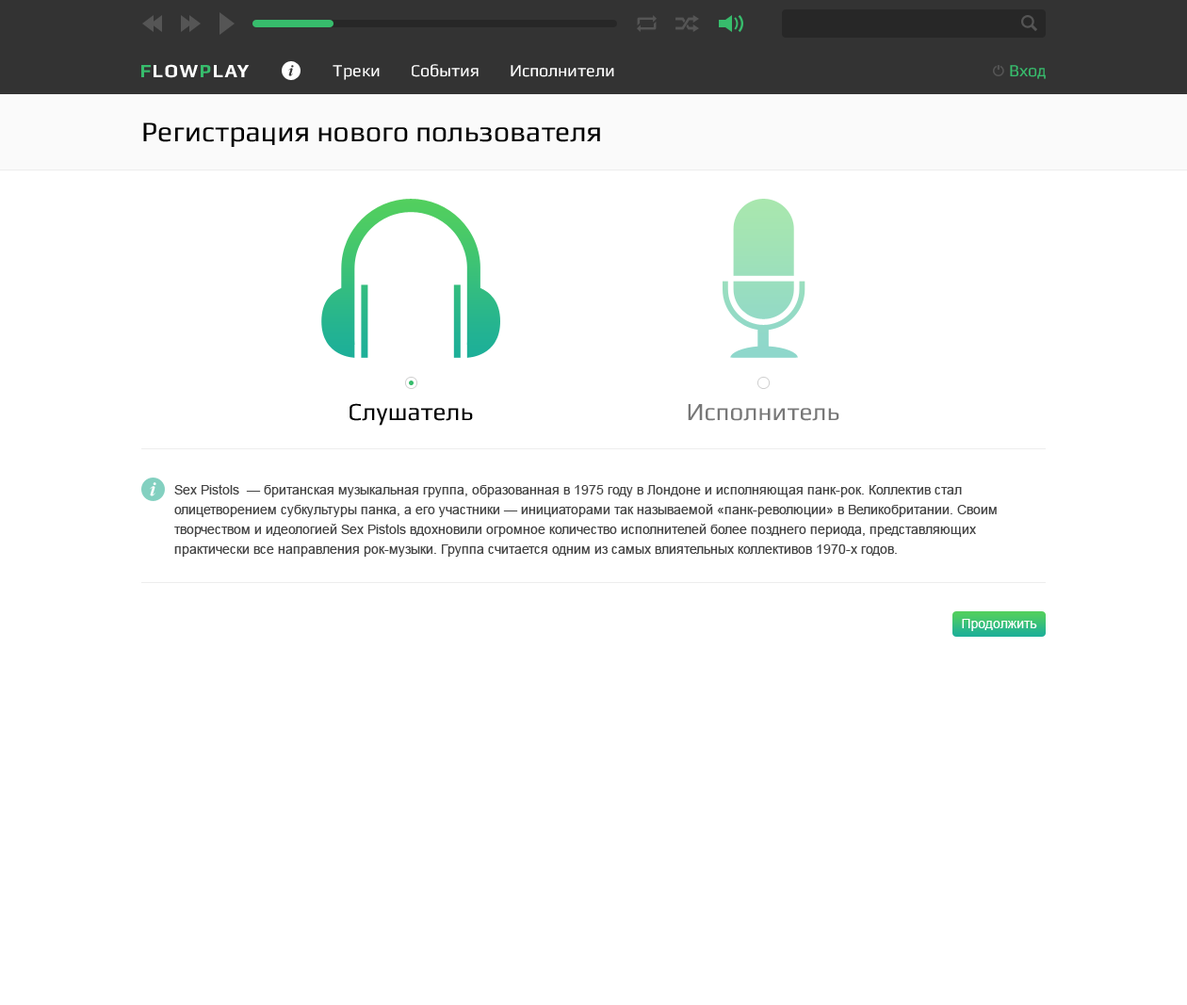
<style>
.page{position:relative;width:1187px;height:1005px;background:#ffffff}
.page>*{position:absolute;margin:0}
.t1{font:28.3px "Play";color:#000000}
.t2{font:24.5px "Play";color:#000000}
.t3{font:24.5px "Play";color:#777777}
.t4{font:13.2px/19.8px "ArialMT";color:#444444}
.t5{font:13.2px "ArialMT";color:#ffffff}
</style>
<div class="page">
<p class="t1" style="left:143px;top:122px;width:457px;height:25px">Регистрация нового пользователя</p>
<p class="t2" style="left:349px;top:403px;width:124px;height:23px">Слушатель</p>
<p class="t3" style="left:687px;top:404px;width:152px;height:17px">Исполнитель</p>
<p class="t4" style="left:174px;top:484px;width:822px;height:73px">Sex Pistols  — британская музыкальная группа, образованная в 1975 году в Лондоне и исполняющая панк-рок. Коллектив стал олицетворением субкультуры панка, а его участники — инициаторами так называемой «панк-революции» в Великобритании. Своим творчеством и идеологией Sex Pistols вдохновили огромное количество исполнителей более позднего периода, представляющих практически все направления рок-музыки. Группа считается одним из самых влиятельных коллективов 1970-х годов.</p>
<p class="t5" style="left:962px;top:619px;width:75px;height:12px">Продолжить</p>
</div>
